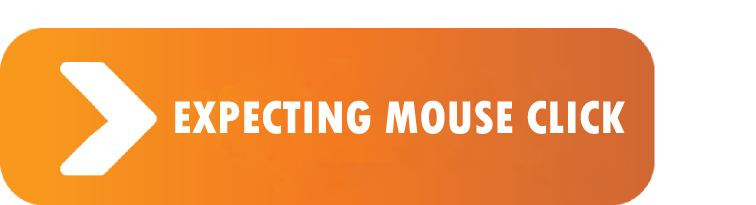
<style>
.page{position:relative;width:756px;height:205px;background:#ffffff}
.page>*{position:absolute;margin:0}
.t1{font:48px "TwCenMT-CondensedExtraBold";color:#ffffff}
</style>
<div class="page">
<p class="t1" style="left:175px;top:100px;width:450px;height:34px">EXPECTING MOUSE CLICK</p>
</div>
